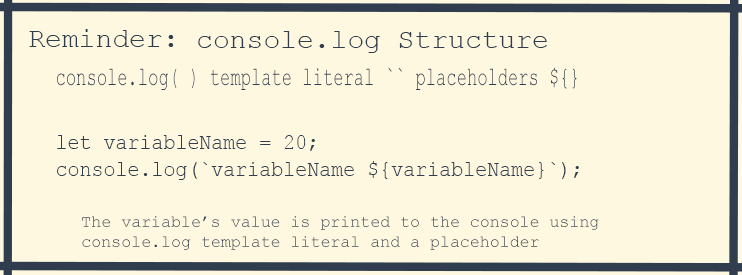
<style>
.page{position:relative;width:742px;height:275px;background:#fff8e1}
.page>*{position:absolute;margin:0}
.t1{font:28px "CourierNewPSMT";color:#303d4e}
.t2{font:26.5px "CourierNewPSMT";color:#303d4e;scale:0.65 1}
.t3{font:22px "CourierNewPSMT";color:#303d4e;scale:0.91 1}
.t4{font:24px "CourierNewPS-BoldItalicMT";color:#303d4e;scale:0.91 1}
.t5{font:16.6px "CourierNewPSMT";color:#303d4e}
</style>
<div class="page">
<p class="t1" style="left:29px;top:29px;width:145px;height:18px">Reminder:</p>
<p class="t1" style="left:198px;top:31px;width:349px;height:22px">console.log Structure</p>
<p class="t2" style="left:57px;top:67px;width:520px;height:23px">console.log( ) template literal `` placeholders ${}</p>
<p class="t3" style="left:57px;top:135px;width:522px;height:45px"><span class="t4">  <br><br>  </span>let variableName = 20;<br>  console.log(`variableName ${variableName}`);</p>
<p class="t5" style="left:82px;top:216px;width:517px;height:34px">The variable’s value is printed to the console using <br>console.log template literal and a placeholder</p>
</div>
